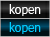
<style>
.page{position:relative;width:50px;height:37px}
.page>*{position:absolute;margin:0}
.t1{font:12px "Tahoma";color:#ffffff}
.t2{font:12px "Tahoma";color:#00ccff}
</style>
<div class="page">
<p class="t1" style="left:9px;top:4px;width:32px;height:12px">kopen</p>
<p class="t2" style="left:9px;top:22px;width:32px;height:12px">kopen</p>
</div>
